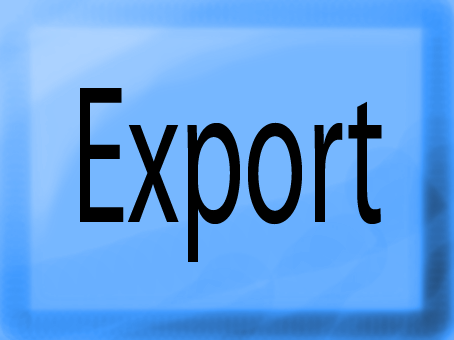
<style>
.page{position:relative;width:454px;height:340px}
.page>*{position:absolute;margin:0}
.t1{font:199.5px "MyriadPro-Regular";color:#000000;scale:0.57 1}
</style>
<div class="page">
<p class="t1" style="left:80px;top:88px;width:302px;height:174px">Export</p>
</div>
